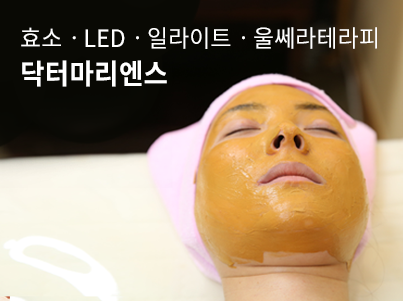
<style>
.page{position:relative;width:403px;height:301px}
.page>*{position:absolute;margin:0}
.t1{font:24px/37px "NotoSansCJKkr-Regular";letter-spacing:0.01em;color:#ffffff;scale:0.95 1}
.t2{font:28px/37px "NotoSansCJKkr-Bold";letter-spacing:0.01em;color:#ffffff;scale:0.95 1}
</style>
<div class="page">
<p class="t1" style="left:21px;top:27px;width:356px;height:60px">효소ㆍLEDㆍ일라이트ㆍ울쎄라테라피<br><span class="t2">닥터마리엔스</span></p>
</div>
